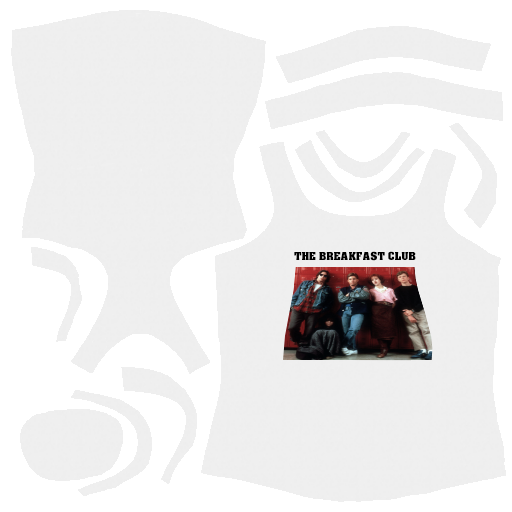
<style>
.page{position:relative;width:512px;height:512px;background:#efefef}
.page>*{position:absolute;margin:0}
.t1{font:10.7px "AcmeFont";color:#000000}
</style>
<div class="page">
<p class="t1" style="left:294px;top:251px;width:122px;height:10px">THE BREAKFAST CLUB</p>
</div>
